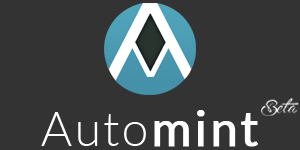
<style>
.page{position:relative;width:300px;height:150px;background:#333333}
.page>*{position:absolute;margin:0}
.t1{font:48px "Lato-Light";letter-spacing:0.05em;color:#ffffff}
.t2{font:48px "Lato-Regular";letter-spacing:0.05em;color:#ffffff;font-weight:bold}
</style>
<div class="page">
<p class="t1" style="left:41px;top:110px;width:217px;height:37px">Auto<span class="t2">mint</span></p>
</div>
